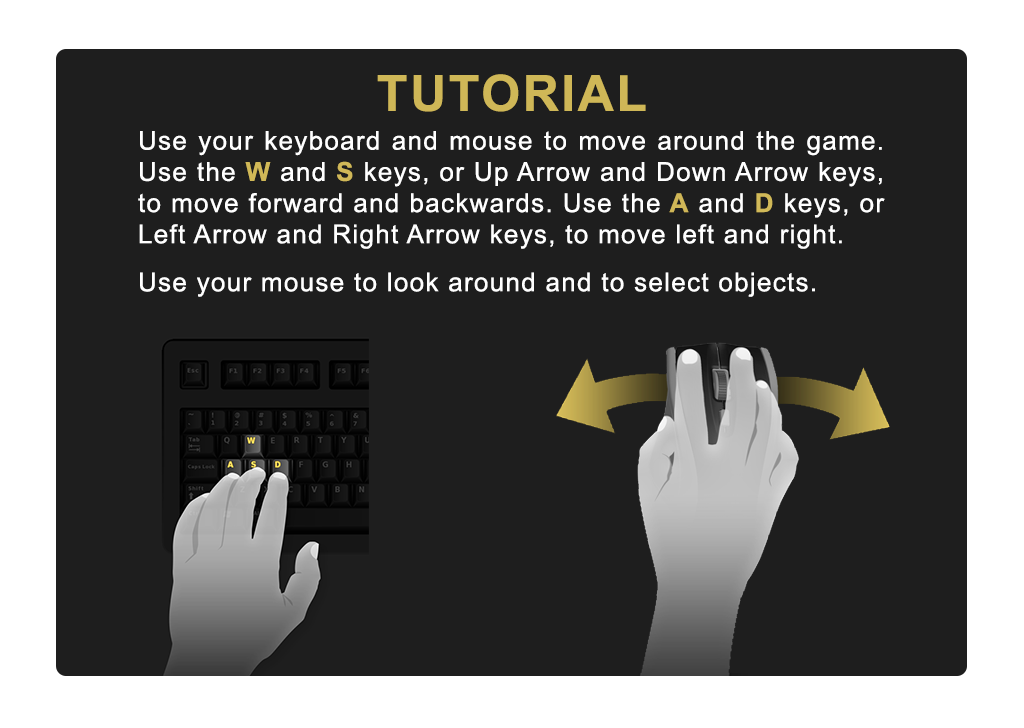
<style>
.page{position:relative;width:1024px;height:728px;background:#1e1e1e}
.page>*{position:absolute;margin:0}
.t1{font:50px "Arial-BoldMT";letter-spacing:0.05em;color:#cfb757}
.t2{font:26px "ArialMT";letter-spacing:0.05em;color:#ffffff}
.t3{font:26px "Arial-BoldMT";letter-spacing:0.05em;color:#d0b857}
.t4{font:26px "Arial-BoldMT";letter-spacing:0.05em;color:#d0b858}
.t5{font:26px "Arial-BoldMT";letter-spacing:0.05em;color:#cfb657}
.t6{font:26px "Arial-BoldMT";letter-spacing:0.05em;color:#d1b958}
.t7{font:26px/24px "ArialMT";letter-spacing:0.05em;color:#ffffff}
</style>
<div class="page">
<p class="t1" style="left:377px;top:74px;width:269px;height:38px">TUTORIAL</p>
<p class="t2" style="left:138px;top:131px;width:747px;height:166px;text-align:justify">Use your keyboard and mouse to move around the game. Use the <span class="t3">W</span> and <span class="t4">S</span> keys, or Up Arrow and Down Arrow keys, to move forward and backwards. Use the<span class="t5"> A</span> and <span class="t6">D</span> keys, or Left Arrow and Right Arrow keys, to move left and right. <br><span class="t7"><br>Use your mouse to look around and to select objects.</span></p>
</div>
